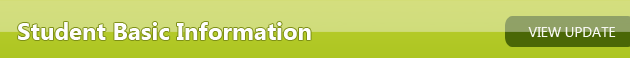
<style>
.page{position:relative;width:630px;height:58px}
.page>*{position:absolute;margin:0}
.t1{font:24px "SegoeUI-Bold";color:#fefefe}
.t2{font:14px "SegoeUI";color:#f6f7f1}
</style>
<div class="page">
<p class="t1" style="left:18px;top:22px;width:293px;height:18px">Student Basic Information</p>
<p class="t2" style="left:528px;top:27px;width:88px;height:10px">VIEW UPDATE</p>
</div>
